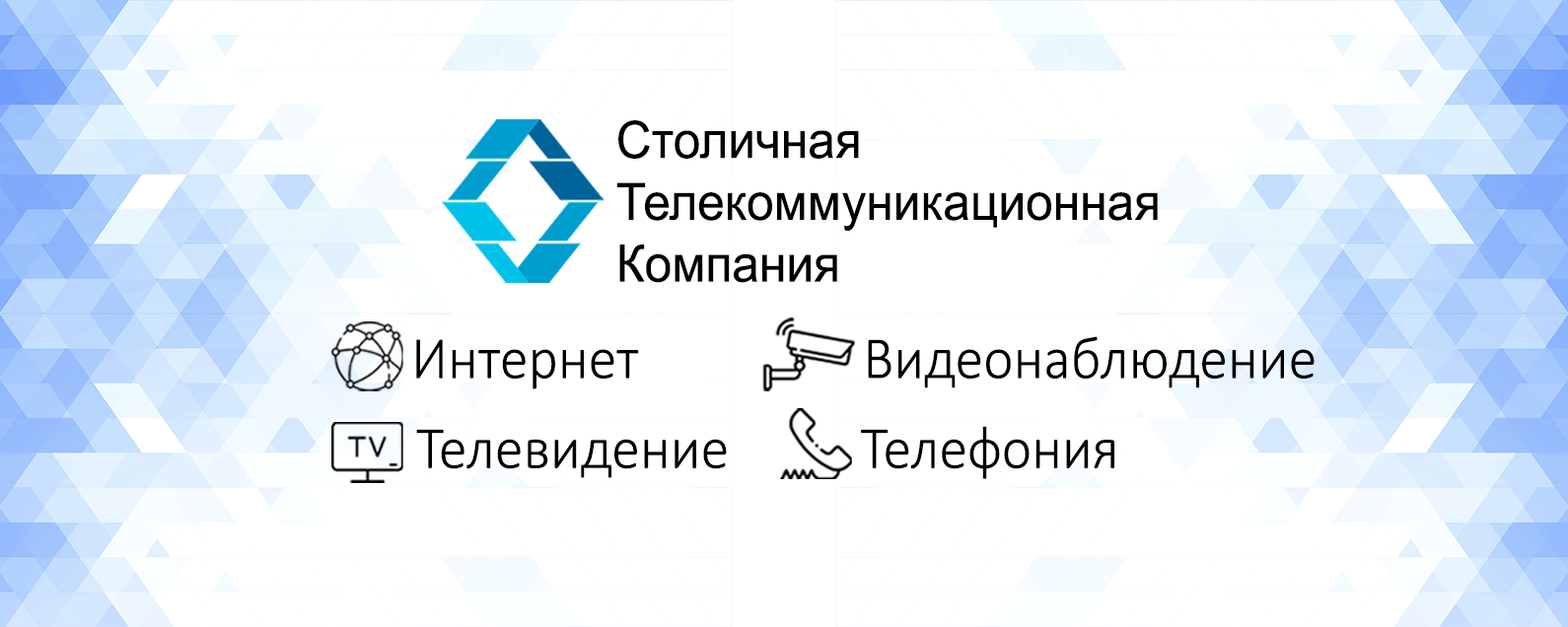
<style>
.page{position:relative;width:1568px;height:627px;background:#ffffff}
.page>*{position:absolute;margin:0}
.t1{font:51.5px "ArialMT";color:#000000;scale:0.95 1}
.t2{font:60.4px "Calibri-Light";color:#000000;scale:0.95 1}
</style>
<div class="page">
<p class="t1" style="left:616px;top:120px;width:542px;height:163px">Столичная<br>Телекоммуникационная<br>Компания</p>
<p class="t2" style="left:416px;top:339px;width:223px;height:51px">Интернет</p>
<p class="t2" style="left:868px;top:336px;width:447px;height:53px">Видеонаблюдение</p>
<p class="t2" style="left:416px;top:429px;width:311px;height:49px">Телевидение</p>
<p class="t2" style="left:861px;top:426px;width:253px;height:53px">Телефония</p>
</div>
